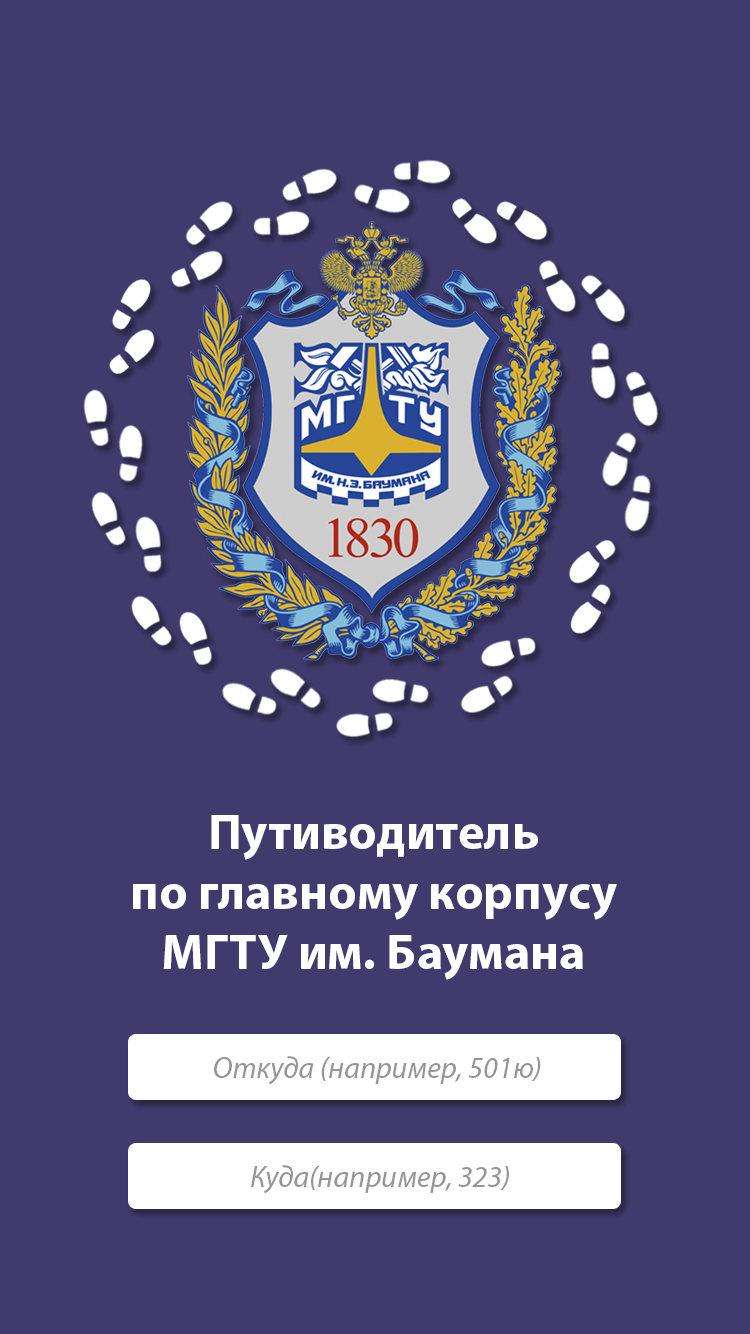
<style>
.page{position:relative;width:750px;height:1334px;background:#403b6c}
.page>*{position:absolute;margin:0}
.t1{font:50px "MyriadPro-Bold";color:#ffffff}
.t2{font:30px "MyriadPro-It";color:#959595}
</style>
<div class="page">
<p class="t1" style="left:133px;top:815px;width:484px;height:165px;text-align:center">Путиводитель<br>по главному корпусу<br>МГТУ им. Баумана</p>
<p class="t2" style="left:214px;top:1056px;width:327px;height:29px">Откуда (например, 501ю)</p>
<p class="t2" style="left:251px;top:1165px;width:258px;height:29px">Куда(например, 323)</p>
</div>
